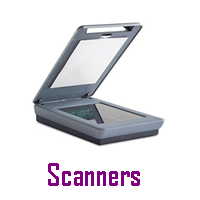
<style>
.page{position:relative;width:200px;height:200px;background:#ffffff}
.page>*{position:absolute;margin:0}
.t1{font:30px "AgencyFB-Bold";letter-spacing:0.025em;color:#800080}
</style>
<div class="page">
<p class="t1" style="left:48px;top:163px;width:92px;height:23px">Scanners</p>
</div>
